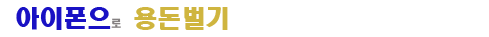
<style>
.page{position:relative;width:489px;height:37px;background:#ffffff}
.page>*{position:absolute;margin:0}
.t1{font:24px "HeadlineR-HM";color:#1911c4}
.t2{font:10px "HeadlineR-HM";color:#858182}
.t3{font:24px "HeadlineR-HM";color:#cfb53f}
</style>
<div class="page">
<p class="t1" style="left:16px;top:7px;width:212px;height:23px">아이폰으<span class="t2">로 </span><span class="t3">용돈벌기</span></p>
</div>
